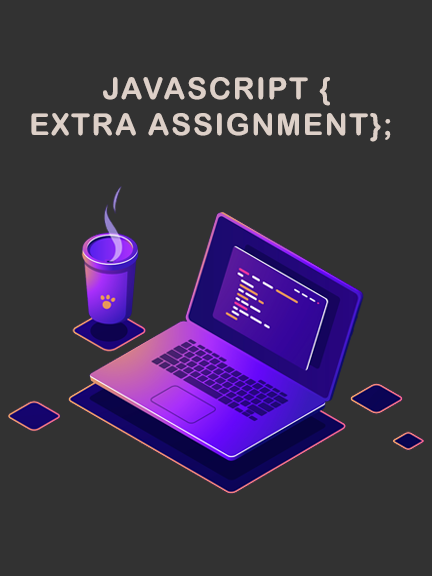
<style>
.page{position:relative;width:432px;height:576px;background:#323232}
.page>*{position:absolute;margin:0}
.t1{font:30px "ArialRoundedMTBold";letter-spacing:0.06em;color:#ddd0c8;text-transform:uppercase}
.t2{font:30px "ArialRoundedMTBold";letter-spacing:0.06em;color:#323232;text-transform:uppercase}
</style>
<div class="page">
<p class="t1" style="left:31px;top:77px;width:371px;height:65px;text-align:center">javaScript {<br>Extra Assignment};<span class="t2">;</span></p>
</div>
